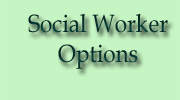
<style>
.page{position:relative;width:180px;height:100px;background:#c5f5c2}
.page>*{position:absolute;margin:0}
.t1{font:25px "BookAntiqua";color:#05312c;scale:0.9 1}
</style>
<div class="page">
<p class="t1" style="left:28px;top:13px;width:140px;height:56px;text-align:center">Social Worker<br>Options</p>
</div>
